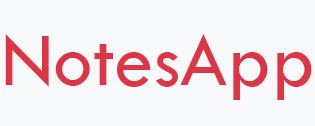
<style>
.page{position:relative;width:315px;height:126px;background:#f8f9fa}
.page>*{position:absolute;margin:0}
.t1{font:79.2px "TwCenMT-Regular";color:#dc3545}
</style>
<div class="page">
<p class="t1" style="left:5px;top:34px;width:307px;height:66px">NotesApp</p>
</div>
